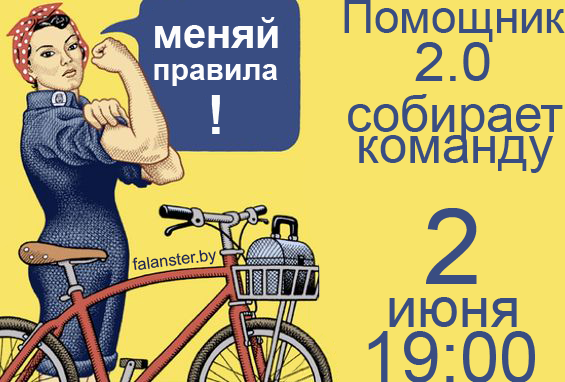
<style>
.page{position:relative;width:565px;height:382px;background:#f8e469}
.page>*{position:absolute;margin:0}
.t1{font:45.7px "ArialMT";color:#394d82}
.t2{font:41.6px "Arial-BoldMT";color:#fcfcfc}
.t3{font:56px "ArialMT";color:#394d82}
.t4{font:30.1px "Arial-BoldMT";color:#fcfcfc}
.t5{font:53.8px "Arial-BoldMT";color:#fcfcfc}
.t6{font:50.7px/31.7px "ArialMT";color:#394d82}
.t7{font:106.2px "ArialMT";color:#394d82}
.t8{font:16.5px "ArialMT";color:#202551}
.t9{font:70.7px "ArialMT";color:#394d82}
</style>
<div class="page">
<p class="t1" style="left:344px;top:0px;width:221px;height:42px">Помощник</p>
<p class="t2" style="left:155px;top:17px;width:123px;height:31px">меняй</p>
<p class="t3" style="left:415px;top:42px;width:75px;height:39px">2.0</p>
<p class="t4" style="left:154px;top:64px;width:124px;height:22px">правила</p>
<p class="t5" style="left:211px;top:95px;width:9px;height:39px">!</p>
<p class="t6" style="left:348px;top:94px;width:215px;height:79px;text-align:center">собирает<br>команду</p>
<p class="t7" style="left:426px;top:208px;width:51px;height:76px">2</p>
<p class="t8" style="left:132px;top:250px;width:84px;height:20px;rotate:-7deg">falanster.by</p>
<p class="t3" style="left:389px;top:297px;width:128px;height:30px">июня</p>
<p class="t9" style="left:368px;top:331px;width:167px;height:51px">19:00</p>
</div>
